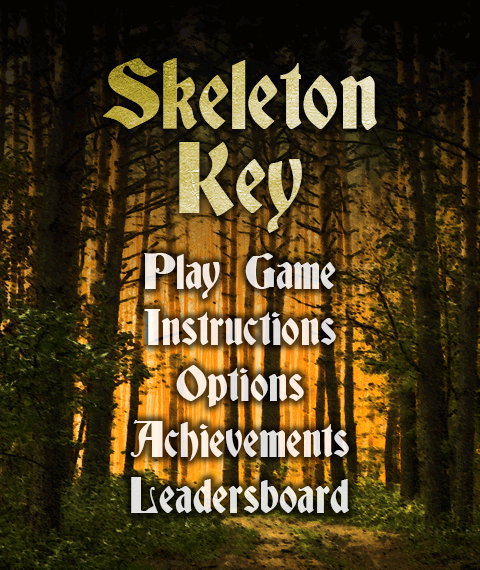
<style>
.page{position:relative;width:480px;height:570px}
.page>*{position:absolute;margin:0}
.t1{font:91px/84px "Deutsch-Gothic"}
.t2{font:46px/56px "Deutsch-Gothic";color:#f2e8de}
</style>
<div class="page">
<p class="t1" style="left:103px;top:58px;width:274px;height:175px;text-align:center">Skeleton<br>Key</p>
<p class="t2" style="left:130px;top:253px;width:219px;height:260px;text-align:center">Play Game<br>Instructions<br>Options<br>Achievements<br>Leadersboard</p>
</div>
